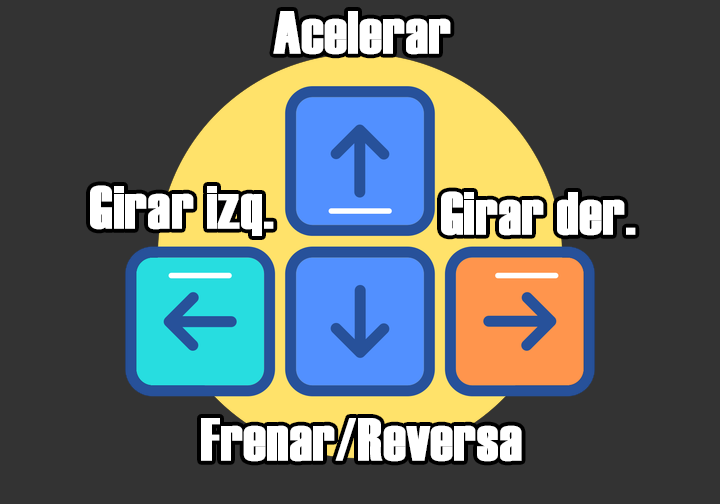
<style>
.page{position:relative;width:720px;height:504px;background:#333333}
.page>*{position:absolute;margin:0}
.t1{font:60px "Haettenschweiler";color:#ffffff;font-weight:bold}
</style>
<div class="page">
<p class="t1" style="left:273px;top:11px;width:178px;height:44px">Acelerar</p>
<p class="t1" style="left:90px;top:185px;width:184px;height:51px">Girar izq.</p>
<p class="t1" style="left:441px;top:191px;width:195px;height:45px">Girar der.</p>
<p class="t1" style="left:201px;top:418px;width:321px;height:44px">Frenar/Reversa</p>
</div>
